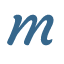
<style>
.page{position:relative;width:64px;height:64px;background:#ffffff}
.page>*{position:absolute;margin:0}
.t1{font:60px "Courgette-Regular";color:#36678c}
</style>
<div class="page">
<p class="t1" style="left:7px;top:14px;width:47px;height:32px">m</p>
</div>
